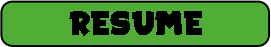
<style>
.page{position:relative;width:271px;height:47px;background:#50ae37}
.page>*{position:absolute;margin:0}
.t1{font:18px "SpaceComics";color:#000000}
</style>
<div class="page">
<p class="t1" style="left:69px;top:11px;width:133px;height:25px">RESUME</p>
</div>
